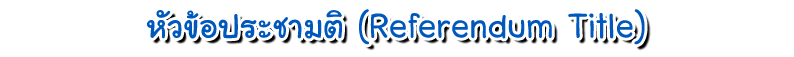
<style>
.page{position:relative;width:794px;height:57px;background:#ffffff}
.page>*{position:absolute;margin:0}
.t1{font:48px "LayijiMaHaNiYomV1.2";color:#0058bc}
</style>
<div class="page">
<p class="t1" style="left:147px;top:9px;width:498px;height:36px">หัวข้อประชามติ (Referendum Title)</p>
</div>
